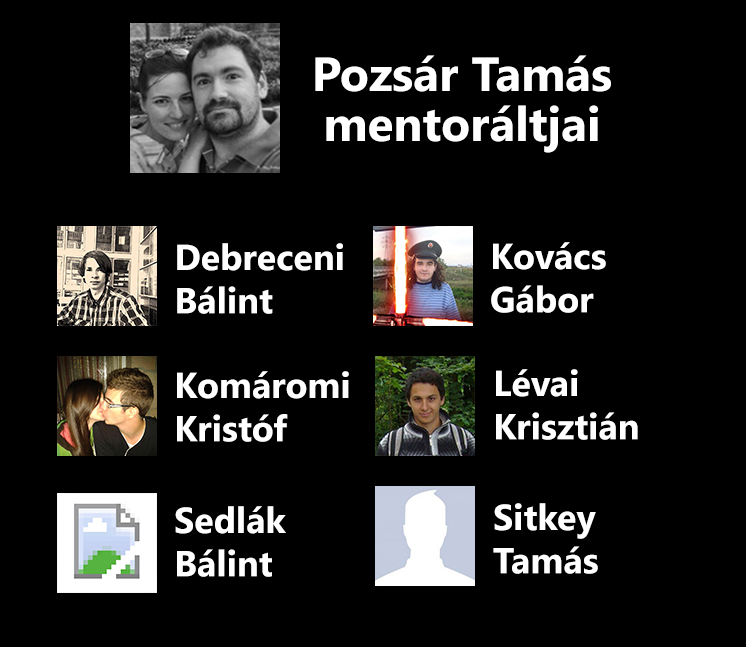
<style>
.page{position:relative;width:746px;height:647px;background:#000000}
.page>*{position:absolute;margin:0}
.t1{font:48px/50px "SegoeUI-Bold";color:#ffffff}
.t2{font:36px "SegoeUI-Bold";color:#ffffff}
</style>
<div class="page">
<p class="t1" style="left:315px;top:55px;width:296px;height:98px;text-align:center">Pozsár Tamás<br>mentoráltjai</p>
<p class="t2" style="left:177px;top:243px;width:166px;height:71px">Debreceni <br>Bálint</p>
<p class="t2" style="left:491px;top:242px;width:115px;height:71px">Kovács<br>Gábor</p>
<p class="t2" style="left:177px;top:371px;width:172px;height:71px">Komáromi<br>Kristóf</p>
<p class="t2" style="left:496px;top:369px;width:142px;height:71px">Lévai<br>Krisztián</p>
<p class="t2" style="left:175px;top:506px;width:111px;height:71px">Sedlák<br>Bálint</p>
<p class="t2" style="left:493px;top:503px;width:105px;height:71px">Sitkey<br>Tamás</p>
</div>
